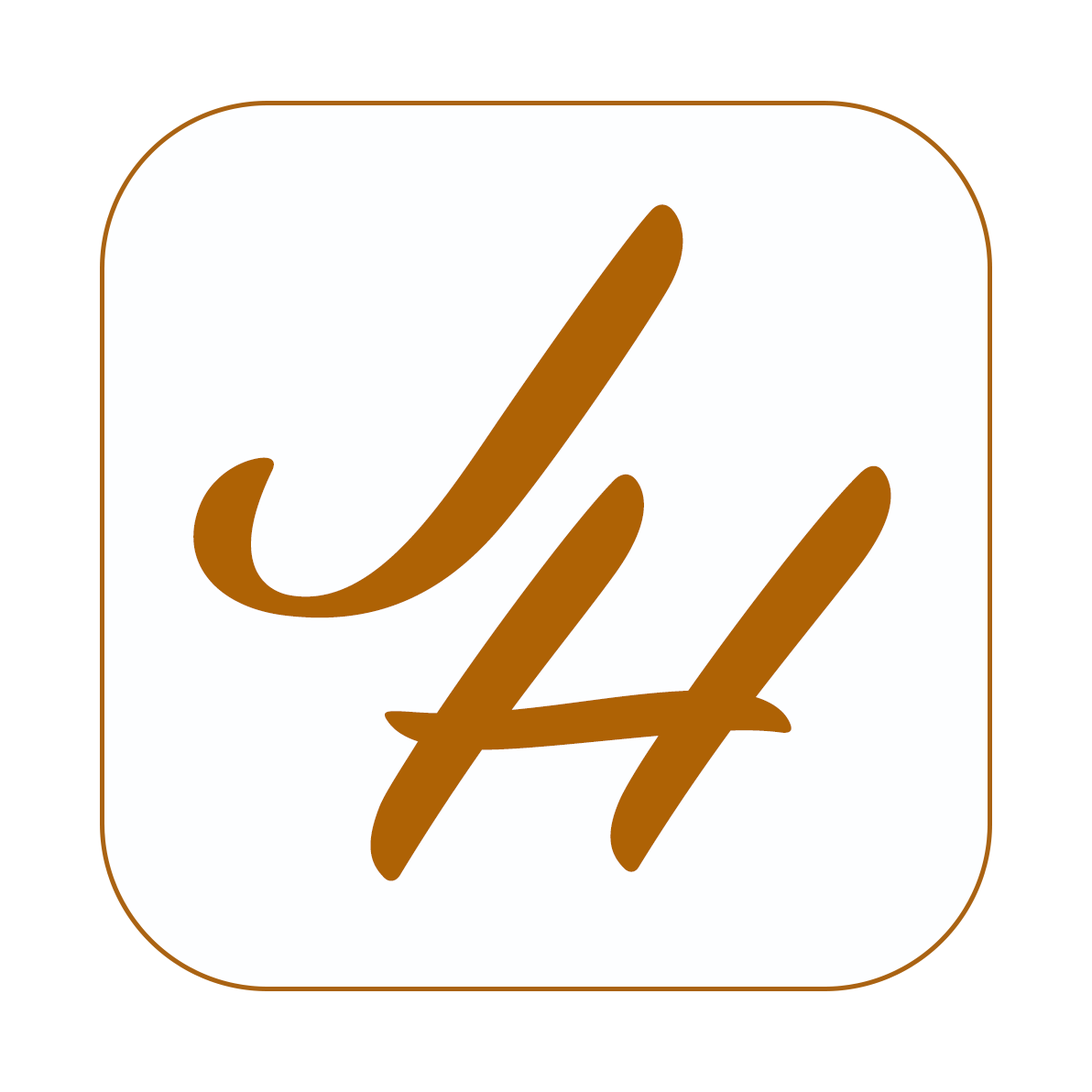
<style>
.page{position:relative;width:1092px;height:1092px;background:#fdfeff}
.page>*{position:absolute;margin:0}
.t1{font:641.3px "SignPainter-HouseScript";color:#ae6205;scale:1.4 1}
</style>
<div class="page">
<p class="t1" style="left:193px;top:204px;width:490px;height:414px">J</p>
<p class="t1" style="left:370px;top:465px;width:521px;height:416px">H</p>
</div>
